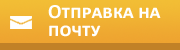
<style>
.page{position:relative;width:180px;height:50px}
.page>*{position:absolute;margin:0}
.t1{font:20px/18px "Calibri-Bold";color:#ffffff;font-variant:small-caps}
</style>
<div class="page">
<p class="t1" style="left:48px;top:5px;width:113px;height:32px">Отправка на <br>почту</p>
</div>
